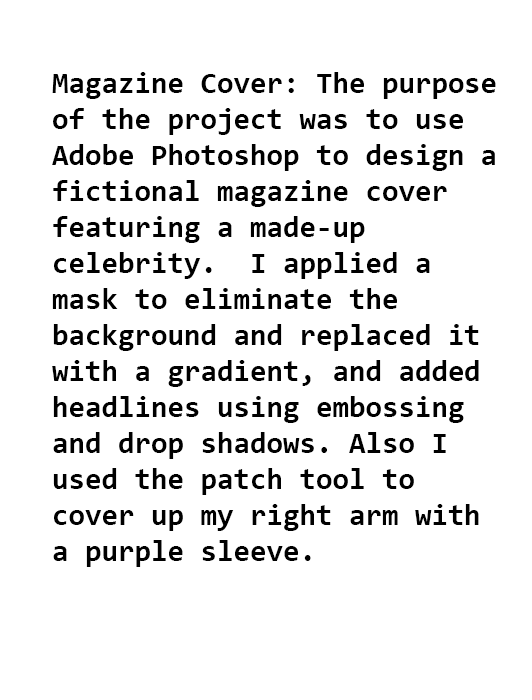
<style>
.page{position:relative;width:532px;height:700px;background:#ffffff}
.page>*{position:absolute;margin:0}
.t1{font:30px "Consolas-Bold";color:#000000}
</style>
<div class="page">
<p class="t1" style="left:52px;top:72px;width:444px;height:495px">Magazine Cover: The purpose <br>of the project was to use <br>Adobe Photoshop to design a <br>fictional magazine cover <br>featuring a made-up <br>celebrity.  I applied a <br>mask to eliminate the <br>background and replaced it<br>with a gradient, and added <br>headlines using embossing <br>and drop shadows. Also I <br>used the patch tool to <br>cover up my right arm with <br>a purple sleeve.</p>
</div>
